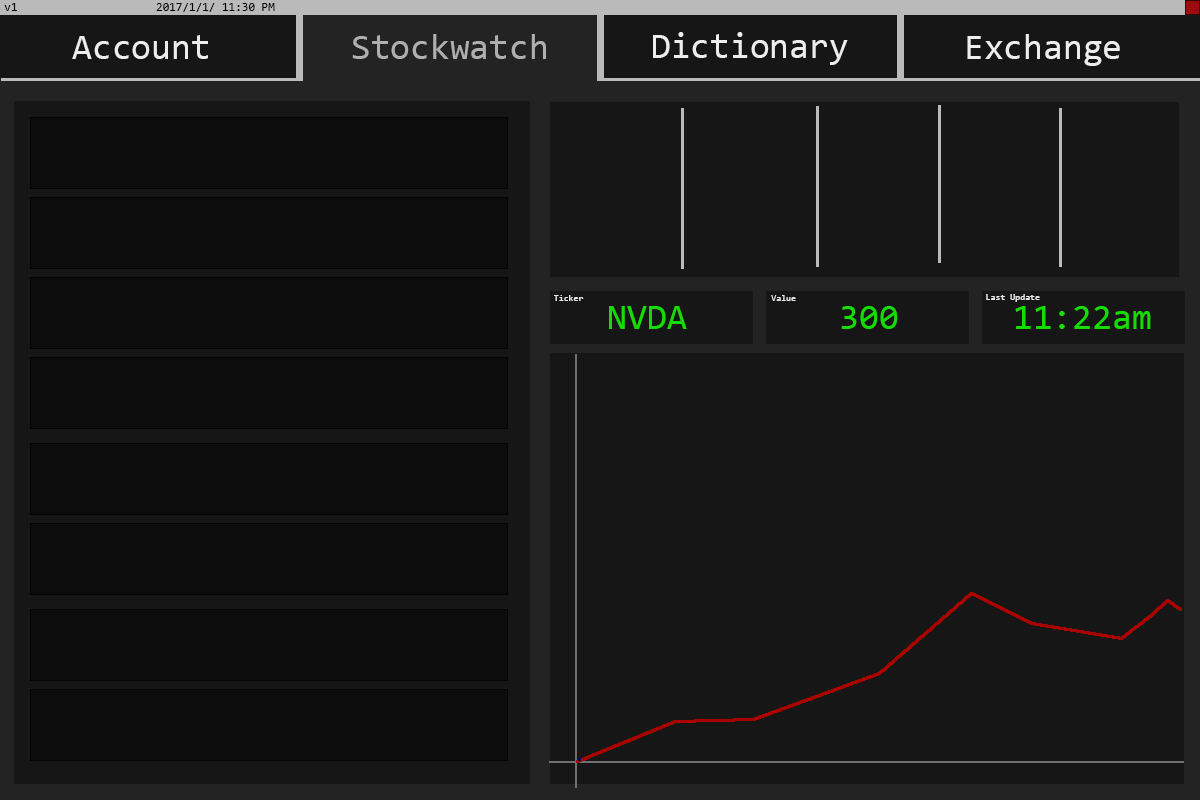
<style>
.page{position:relative;width:1200px;height:800px;background:#161616}
.page>*{position:absolute;margin:0}
.t1{font:12px "Consolas";color:#000000}
.t2{font:36px "Consolas";color:#ededed}
.t3{font:36px "Consolas";color:#afafaf}
.t4{font:9px "Consolas";color:#e8e8e8}
.t5{font:36px "Consolas";color:#15dd00}
</style>
<div class="page">
<p class="t1" style="left:4px;top:3px;width:271px;height:9px">v1                     2017/1/1/ 11:30 PM</p>
<p class="t2" style="left:72px;top:35px;width:136px;height:24px">Account</p>
<p class="t3" style="left:352px;top:34px;width:194px;height:25px">Stockwatch</p>
<p class="t2" style="left:653px;top:32px;width:195px;height:33px">Dictionary</p>
<p class="t2" style="left:967px;top:34px;width:153px;height:32px">Exchange</p>
<p class="t4" style="left:986px;top:294px;width:54px;height:8px">Last Update</p>
<p class="t4" style="left:554px;top:295px;width:30px;height:6px">Ticker</p>
<p class="t4" style="left:771px;top:295px;width:25px;height:6px">Value</p>
<p class="t5" style="left:609px;top:306px;width:78px;height:23px">NVDA</p>
<p class="t5" style="left:841px;top:306px;width:57px;height:23px">300</p>
<p class="t5" style="left:1015px;top:306px;width:136px;height:23px">11:22am</p>
</div>
